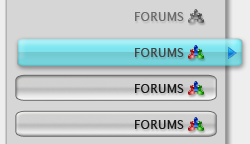
<style>
.page{position:relative;width:250px;height:144px;background:#d6d6d6}
.page>*{position:absolute;margin:0}
.t1{font:12.3px "LucidaSans";letter-spacing:0.006em;color:#6b6b6b}
.t2{font:12.3px "LucidaSans";letter-spacing:0.006em;color:#454545}
.t3{font:12.3px "LucidaSans";letter-spacing:0.006em;color:#191919}
</style>
<div class="page">
<p class="t1" style="left:135px;top:12px;width:49px;height:9px">FORUMS</p>
<p class="t2" style="left:135px;top:48px;width:49px;height:9px">FORUMS</p>
<p class="t3" style="left:135px;top:84px;width:49px;height:9px">FORUMS</p>
<p class="t3" style="left:135px;top:120px;width:49px;height:9px">FORUMS</p>
</div>
